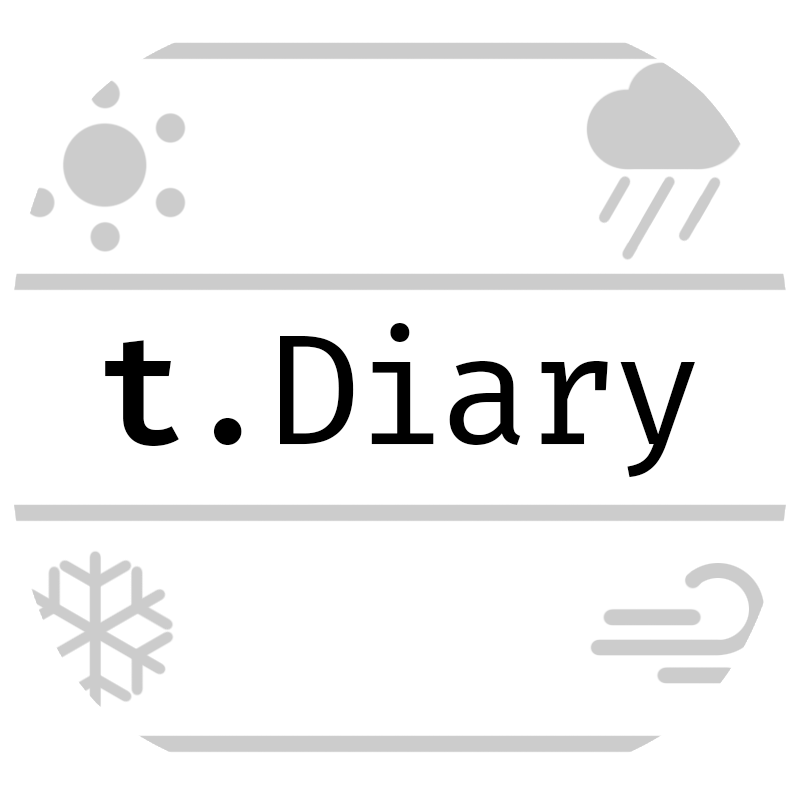
<style>
.page{position:relative;width:800px;height:800px;background:#ffffff}
.page>*{position:absolute;margin:0}
.t1{font:152px "FiraCode-Regular";letter-spacing:-0.05em;color:#000000}
.t2{font:152px "FiraCode-SemiBold";letter-spacing:-0.05em;color:#000000}
</style>
<div class="page">
<p class="t1" style="left:105px;top:323px;width:590px;height:155px"><span class="t2">t</span>.Diary</p>
</div>
